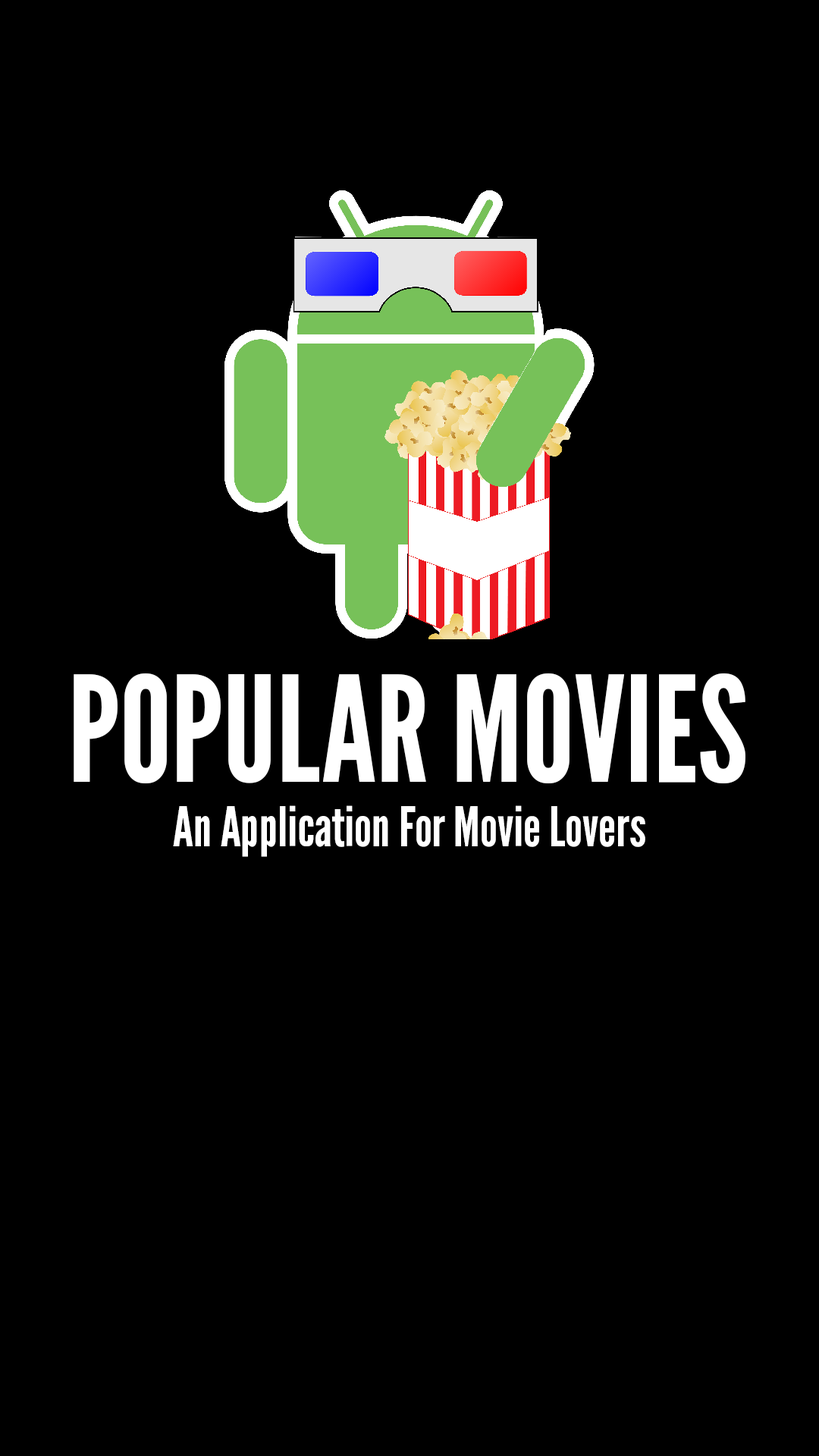
<style>
.page{position:relative;width:819px;height:1456px;background:#000000}
.page>*{position:absolute;margin:0}
.t1{font:146.4px "LeagueGothic-Regular";color:#ffffff}
.t2{font:54.6px "LeagueGothic-Regular";color:#ffffff}
</style>
<div class="page">
<p class="t1" style="left:74px;top:673px;width:671px;height:110px">POPULAR MOVIES</p>
<p class="t2" style="left:173px;top:805px;width:472px;height:52px">An Application For Movie Lovers</p>
</div>
